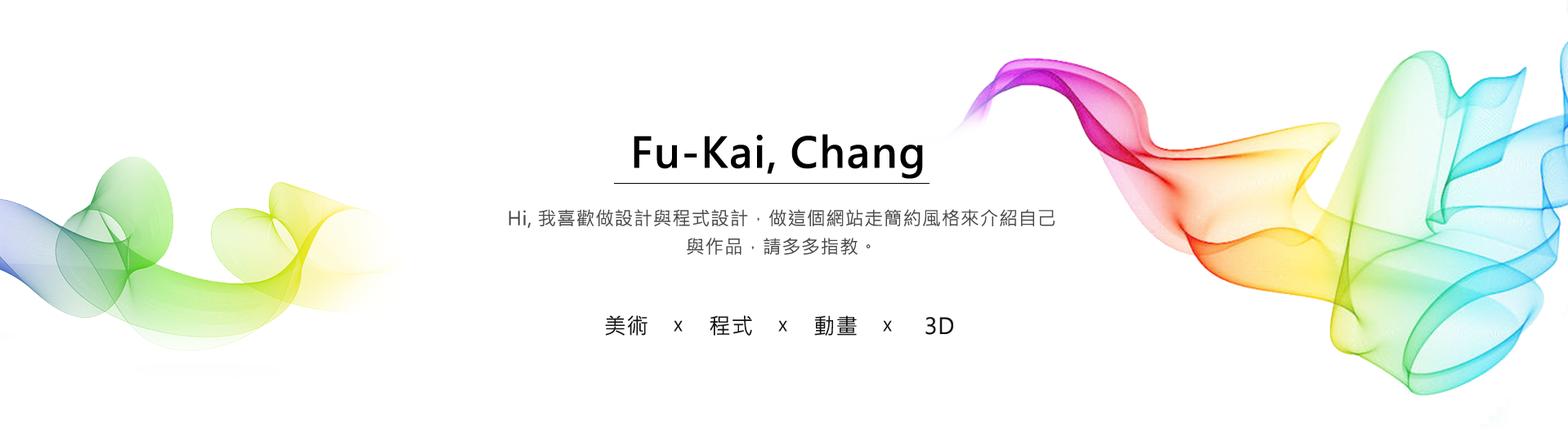
<style>
.page{position:relative;width:1568px;height:428px;background:#ffffff}
.page>*{position:absolute;margin:0}
.t1{font:41.7px "MicrosoftJhengHeiBold";letter-spacing:0.03em;color:#000000}
.t2{font:18.7px/28.4px "MicrosoftJhengHeiRegular";letter-spacing:0.03em;color:#4a4a4a}
.t3{font:22px "MicrosoftJhengHeiRegular";letter-spacing:0.03em;color:#131313}
.t4{font:13.7px "MicrosoftJhengHeiRegular";letter-spacing:0.03em;color:#131313}
</style>
<div class="page">
<p class="t1" style="left:634px;top:134px;width:289px;height:45px">Fu-Kai, Chang</p>
<p class="t2" style="left:508px;top:209px;width:547px;height:46px;text-align:center">Hi, 我喜歡做設計與程式設計，做這個網站走簡約風格來介紹自己<br>與作品，請多多指教。</p>
<p class="t3" style="left:605px;top:316px;width:42px;height:20px">美術</p>
<p class="t3" style="left:710px;top:316px;width:42px;height:20px">程式</p>
<p class="t3" style="left:814px;top:316px;width:43px;height:20px">動畫</p>
<p class="t3" style="left:925px;top:317px;width:28px;height:18px">3D</p>
<p class="t4" style="left:674px;top:320px;width:9px;height:12px">X</p>
<p class="t4" style="left:778px;top:320px;width:9px;height:12px">X</p>
<p class="t4" style="left:883px;top:320px;width:9px;height:12px">X</p>
</div>
